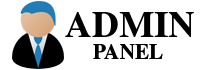
<style>
.page{position:relative;width:200px;height:70px;background:#ffffff}
.page>*{position:absolute;margin:0}
.t1{font:36.3px "STIXGeneral-Bold";color:#000000}
.t2{font:20.9px "STIXGeneral-Bold";color:#000000}
</style>
<div class="page">
<p class="t1" style="left:65px;top:12px;width:129px;height:25px">ADMIN</p>
<p class="t2" style="left:93px;top:44px;width:70px;height:15px">PANEL</p>
</div>
